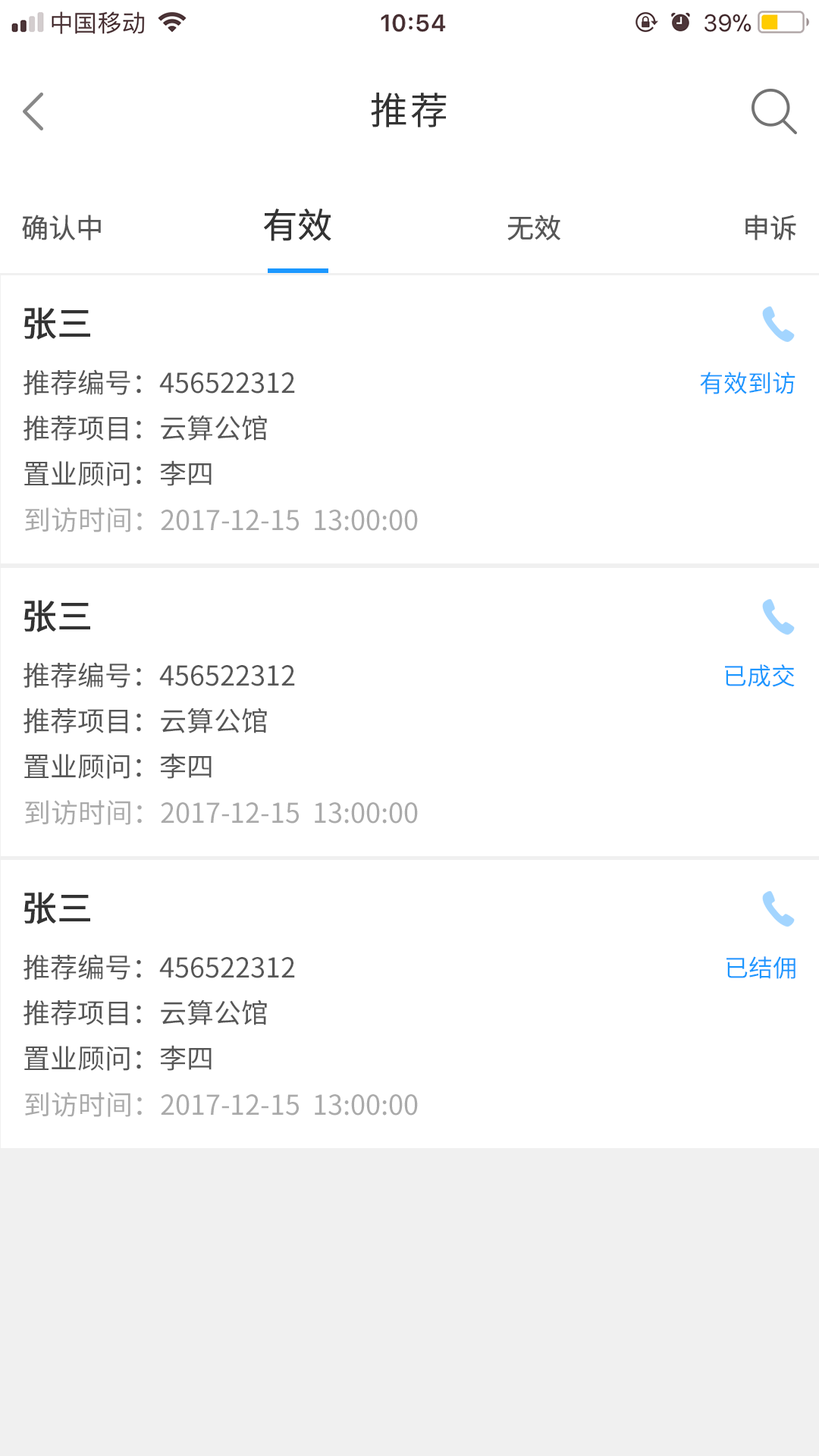
<style>
.page{position:relative;width:819px;height:1456px;background:#ffffff}
.page>*{position:absolute;margin:0}
.t1{font:37.9px "SourceHanSansCN-Regular";letter-spacing:0.06em;color:#333333}
.t2{font:34.9px "SourceHanSansCN-Regular";color:#333333}
.t3{font:27.3px "SourceHanSansCN-Regular";color:#565656}
.t4{font:34.9px "SourceHanSansCN-Regular";color:#333333;font-weight:bold}
.t5{font:24.3px "SourceHanSansCN-Regular";color:#1c97ff}
.t6{font:27.3px "SourceHanSansCN-Regular";color:#aaaaaa}
</style>
<div class="page">
<p class="t1" style="left:371px;top:93px;width:76px;height:34px">推荐</p>
<p class="t2" style="left:264px;top:209px;width:67px;height:32px">有效</p>
<p class="t3" style="left:22px;top:215px;width:79px;height:25px">确认中</p>
<p class="t3" style="left:507px;top:215px;width:53px;height:25px">无效</p>
<p class="t3" style="left:745px;top:215px;width:51px;height:25px">申诉</p>
<p class="t4" style="left:24px;top:307px;width:66px;height:33px">张三</p>
<p class="t3" style="left:24px;top:369px;width:271px;height:26px">推荐编号：456522312</p>
<p class="t5" style="left:700px;top:372px;width:95px;height:22px">有效到访</p>
<p class="t3" style="left:24px;top:415px;width:243px;height:26px">推荐项目：云算公馆</p>
<p class="t3" style="left:24px;top:460px;width:188px;height:26px">置业顾问：李四</p>
<p class="t6" style="left:25px;top:507px;width:393px;height:25px">到访时间：2017-12-15  13:00:00</p>
<p class="t4" style="left:24px;top:600px;width:66px;height:32px">张三</p>
<p class="t3" style="left:24px;top:662px;width:271px;height:26px">推荐编号：456522312</p>
<p class="t5" style="left:725px;top:664px;width:70px;height:23px">已成交</p>
<p class="t3" style="left:24px;top:708px;width:243px;height:25px">推荐项目：云算公馆</p>
<p class="t3" style="left:24px;top:753px;width:188px;height:26px">置业顾问：李四</p>
<p class="t6" style="left:25px;top:800px;width:393px;height:25px">到访时间：2017-12-15  13:00:00</p>
<p class="t4" style="left:24px;top:892px;width:66px;height:32px">张三</p>
<p class="t3" style="left:24px;top:954px;width:271px;height:26px">推荐编号：456522312</p>
<p class="t5" style="left:726px;top:956px;width:69px;height:23px">已结佣</p>
<p class="t3" style="left:24px;top:999px;width:243px;height:26px">推荐项目：云算公馆</p>
<p class="t3" style="left:24px;top:1045px;width:188px;height:26px">置业顾问：李四</p>
<p class="t6" style="left:25px;top:1092px;width:393px;height:25px">到访时间：2017-12-15  13:00:00</p>
</div>
